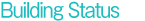
<style>
.page{position:relative;width:145px;height:21px;background:#ffffff}
.page>*{position:absolute;margin:0}
.t1{font:20px "GothicMB101Pro-Regular";letter-spacing:-0.06em;color:#1dbcc0;scale:0.9 1}
</style>
<div class="page">
<p class="t1" style="left:1px;top:1px;width:119px;height:20px">Building Status</p>
</div>
